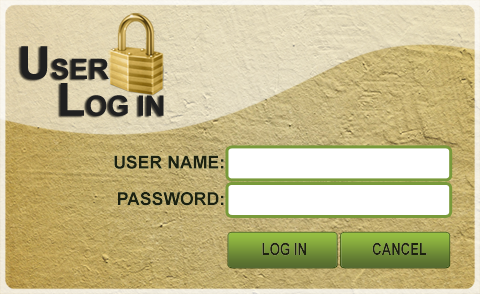
<style>
.page{position:relative;width:480px;height:294px}
.page>*{position:absolute;margin:0}
.t1{font:28.2px/36.7px "Arial-BoldMT";color:#202020}
.t2{font:45.8px/36.7px "Arial-BoldMT";color:#202020}
.t3{font:17.6px "Arial-BoldMT";color:#1c2110}
.t4{font:16.7px "Arial-BoldMT";color:#1c2110;scale:0.79 1}
</style>
<div class="page">
<p class="t1" style="left:21px;top:46px;width:143px;height:70px"><span class="t2">U</span>SER <br>   <span class="t2">L</span>OG IN</p>
<p class="t3" style="left:114px;top:155px;width:110px;height:14px">USER NAME:</p>
<p class="t3" style="left:118px;top:192px;width:106px;height:14px">PASSWORD:</p>
<p class="t4" style="left:262px;top:242px;width:44px;height:14px">LOG IN</p>
<p class="t4" style="left:372px;top:242px;width:55px;height:13px">CANCEL</p>
</div>
